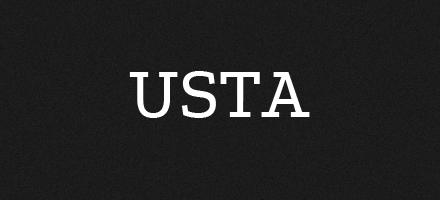
<style>
.page{position:relative;width:440px;height:200px}
.page>*{position:absolute;margin:0}
.t1{font:76px "Podkova";letter-spacing:-0.02em;color:#ffffff}
</style>
<div class="page">
<p class="t1" style="left:129px;top:71px;width:181px;height:47px">USTA</p>
</div>
